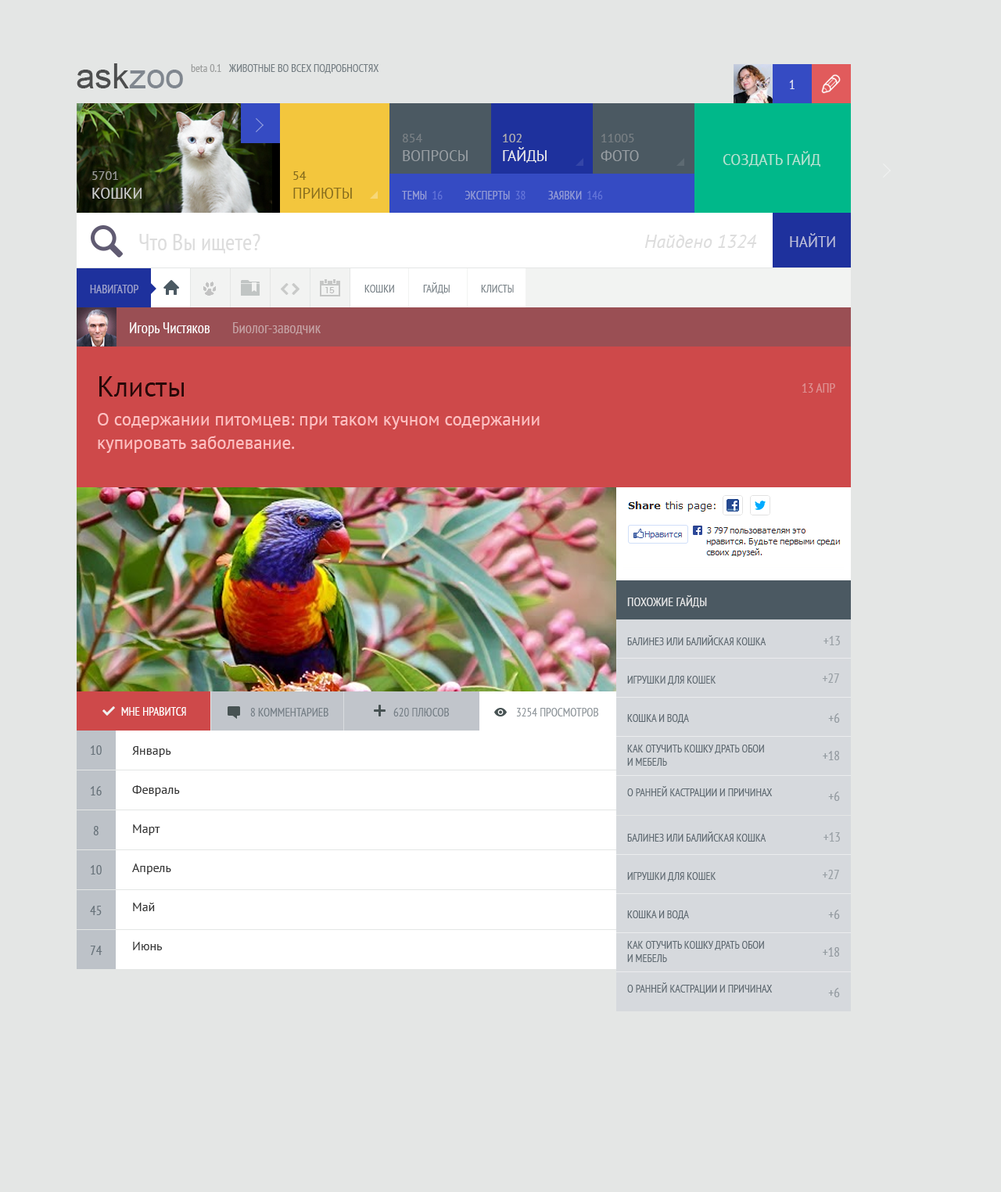
<style>
.page{position:relative;width:1001px;height:1192px;background:#e4e6e5}
.page>*{position:absolute;margin:0}
.t1{font:34.4px "ArialMT"}
.t2{font:10.9px "PTSans-Narrow";color:#9a9c9b}
.t3{font:10.9px "PTSans-Narrow";color:#737d82;text-transform:uppercase}
.t4{font:13.3px "PTSans-Narrow";color:#e1e3f4}
.t5{font:14.9px/18.8px "PTSans-Regular";color:#989ea3;text-transform:uppercase}
.t6{font:12.5px/18.8px "PTSans-Regular";color:#989ea3;text-transform:uppercase}
.t7{font:14.9px/18.8px "PTSans-Regular";color:#ebecee;text-transform:uppercase}
.t8{font:12.5px/18.8px "PTSans-Regular";color:#aeaeae;text-transform:uppercase}
.t9{font:12.5px/18.8px "PTSans-Regular";text-transform:uppercase}
.t10{font:14.9px/18.8px "PTSans-Regular";text-transform:uppercase}
.t11{font:14.9px "PTSans-Regular";color:#b8e4d5;text-transform:uppercase}
.t12{font:14.9px/18.8px "PTSans-Regular";color:#cdcecf;text-transform:uppercase}
.t13{font:12.5px/18.8px "PTSans-Regular";color:#cdcecf;text-transform:uppercase}
.t14{font:14.9px/18.8px "PTSans-Regular";color:#866c1d;text-transform:uppercase}
.t15{font:12.5px/18.8px "PTSans-Regular";color:#866c1d;text-transform:uppercase}
.t16{font:11.7px "PTSans-Narrow";color:#969ed7;text-transform:uppercase}
.t17{font:23.5px "PTSans-Narrow";color:#dddddd}
.t18{font:14.9px "PTSans-Regular";color:#bcbfdb;text-transform:uppercase}
.t19{font:18.8px "PTSans-Italic";color:#dddddd}
.t20{font:11.7px "PTSans-Narrow";color:#9ea3cd;text-transform:uppercase}
.t21{font:10.9px "PTSans-Narrow";color:#7b848a;text-transform:uppercase}
.t22{font:14.9px "PTSans-Narrow";color:#ffffff}
.t23{font:14.9px "PTSans-Narrow";color:#c6a4a6}
.t24{font:28.1px "PTSans-Regular";color:#280808}
.t25{font:13.3px "PTSans-Narrow";color:#dd8f8f;text-transform:uppercase}
.t26{font:18px/23.5px "PTSans-Regular";color:#febfc0}
.t27{font:12.5px "PTSans-Narrow";color:#e3e4e5;text-transform:uppercase}
.t28{font:11.7px "PTSans-Narrow";color:#ffffff;text-transform:uppercase}
.t29{font:11.7px "PTSans-Narrow";color:#757f86;text-transform:uppercase}
.t30{font:11.7px "PTSans-Narrow";color:#8f969b;text-transform:uppercase}
.t31{font:13.3px "PTSans-Narrow";color:#67727a}
.t32{font:12.5px/39.1px "PTSans-Regular";color:#343434}
</style>
<div class="page">
<p class="t1" style="left:77px;top:63px;width:106px;height:25px">askzoo</p>
<p class="t2" style="left:191px;top:64px;width:30px;height:8px">beta 0.1</p>
<p class="t3" style="left:228px;top:64px;width:151px;height:9px">животные во всех подробностях</p>
<p class="t4" style="left:789px;top:80px;width:5px;height:9px">1</p>
<p class="t5" style="left:403px;top:134px;width:65px;height:27px"><span class="t6">854<br></span>вопросы</p>
<p class="t7" style="left:503px;top:134px;width:44px;height:29px"><span class="t8">102<br></span>гайды</p>
<p class="t9" style="left:600px;top:134px;width:39px;height:27px">11005<br><span class="t10">фото</span></p>
<p class="t11" style="left:723px;top:151px;width:97px;height:16px">создать гайд</p>
<p class="t12" style="left:92px;top:171px;width:50px;height:28px"><span class="t13">5701<br></span>кошки</p>
<p class="t14" style="left:293px;top:171px;width:59px;height:28px"><span class="t15">54<br></span>приюты</p>
<p class="t16" style="left:402px;top:191px;width:201px;height:8px">темы  16         эксперты  38         заявки  146</p>
<p class="t17" style="left:139px;top:234px;width:121px;height:19px">Что Вы ищете?</p>
<p class="t18" style="left:790px;top:233px;width:45px;height:14px">Найти</p>
<p class="t19" style="left:644px;top:235px;width:113px;height:13px">Найдено 1324</p>
<p class="t20" style="left:90px;top:285px;width:48px;height:8px">навигатор</p>
<p class="t21" style="left:364px;top:285px;width:30px;height:7px">кошки</p>
<p class="t21" style="left:423px;top:282px;width:27px;height:12px">гайды</p>
<p class="t21" style="left:481px;top:285px;width:33px;height:7px">клисты</p>
<p class="t22" style="left:130px;top:322px;width:80px;height:14px">Игорь Чистяков</p>
<p class="t23" style="left:233px;top:322px;width:88px;height:13px">Биолог-заводчик</p>
<p class="t24" style="left:99px;top:376px;width:85px;height:20px">Клисты</p>
<p class="t25" style="left:801px;top:383px;width:34px;height:9px">13 апр</p>
<p class="t26" style="left:98px;top:413px;width:441px;height:40px">О содержании питомцев: при таком кучном содержании купировать заболевание. <br>Если действительно инфекция, то передается от животного к животному по кругу.</p>
<p class="t27" style="left:627px;top:595px;width:80px;height:12px">Похожие гайды</p>
<p class="t28" style="left:121px;top:707px;width:65px;height:8px">мне нравится</p>
<p class="t29" style="left:250px;top:708px;width:78px;height:8px">8 комментариев</p>
<p class="t29" style="left:393px;top:708px;width:57px;height:8px">620 плюсов</p>
<p class="t30" style="left:516px;top:708px;width:83px;height:8px">3254 просмотров</p>
<p class="t31" style="left:90px;top:745px;width:12px;height:9px">10</p>
<p class="t32" style="left:132px;top:746px;width:48px;height:204px">Январь<br>Февраль<br>Март<br>Апрель<br>Май<br>Июнь</p>
<p class="t31" style="left:90px;top:786px;width:12px;height:9px">16</p>
<p class="t31" style="left:93px;top:826px;width:6px;height:9px">8</p>
<p class="t31" style="left:90px;top:865px;width:12px;height:9px">10</p>
<p class="t31" style="left:90px;top:905px;width:12px;height:10px">45</p>
<p class="t31" style="left:90px;top:945px;width:12px;height:10px">74</p>
</div>
